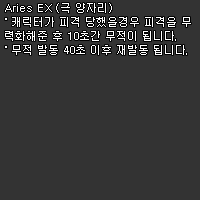
<style>
.page{position:relative;width:200px;height:200px;background:#333333}
.page>*{position:absolute;margin:0}
.t1{font:11px/14px "Dotum";color:#ffffff}
</style>
<div class="page">
<p class="t1" style="left:5px;top:3px;width:186px;height:52px">Aries EX (극 양자리)<br>˚ 캐릭터가 피격 당했을경우 피격을 무<br>력화해준 후 10초간 무적이 됩니다.<br>˚ 무적 발동 40초 이후 재발동 됩니다.</p>
</div>
